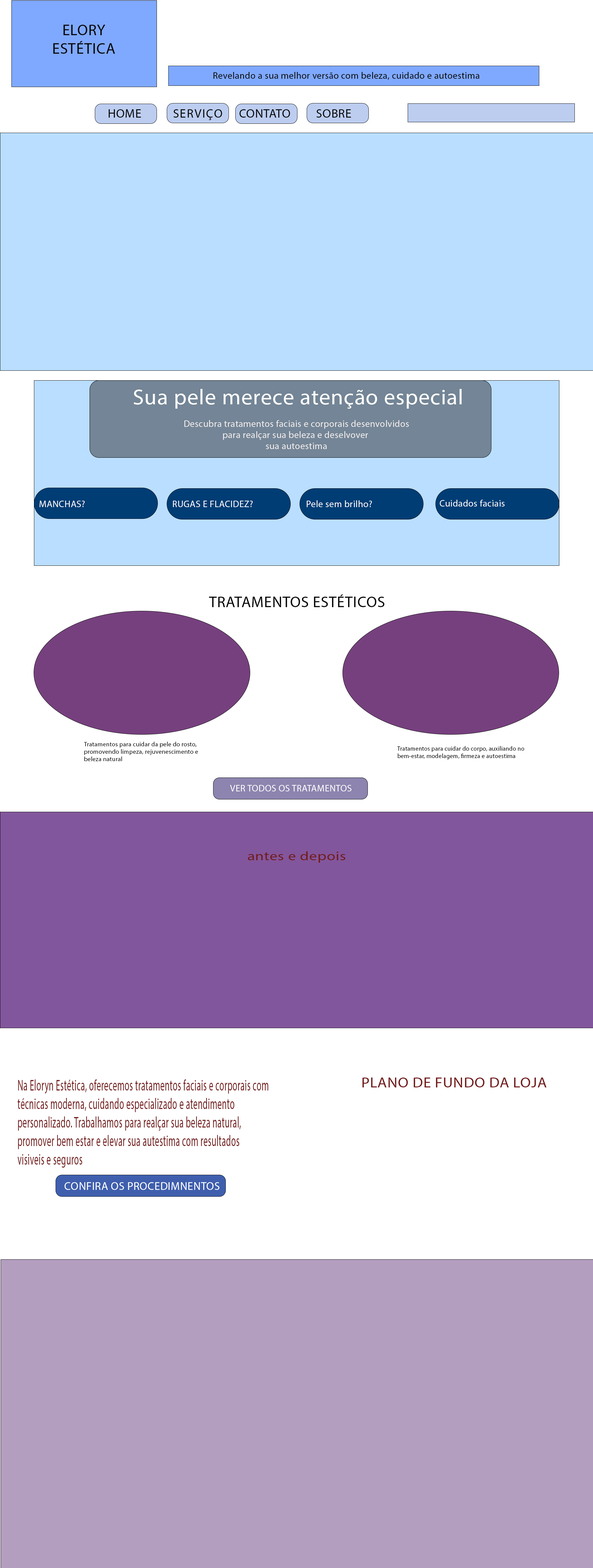
<style>
.page{position:relative;width:593px;height:1568px;background:#ffffff}
.page>*{position:absolute;margin:0}
.t1{font:15.4px "MyriadPro-Regular";letter-spacing:0.025em;color:#080707}
.t2{font:9.3px "MyriadPro-Regular";letter-spacing:0.025em;color:#080707}
.t3{font:12.3px "MyriadPro-Regular";letter-spacing:0.025em;color:#080707}
.t4{font:21.6px "MyriadPro-Regular";letter-spacing:0.025em;color:#fffefe;scale:1.04 1}
.t5{font:9.3px "MyriadPro-Regular";letter-spacing:0.025em;color:#f5eeee}
.t6{font:9.3px "MyriadPro-Regular";letter-spacing:0.025em;color:#fffefe}
.t7{font:6.2px "MyriadPro-Regular";letter-spacing:0.025em;color:#080707}
.t8{font:6.2px "MyriadPro-Regular";letter-spacing:0.025em;color:#080707;scale:0.97 1}
.t9{font:9.3px "MyriadPro-Regular";letter-spacing:0.025em;color:#fffdfd}
.t10{font:12.6px "MyriadPro-Regular";letter-spacing:0.025em;color:#721b1b;scale:1.24 1}
.t11{font:15.4px "MyriadPro-Regular";letter-spacing:0.025em;color:#721b1b;scale:0.56 1}
.t12{font:14.4px "MyriadPro-Regular";letter-spacing:0.025em;color:#721b1b;scale:1.08 1}
.t13{font:11.1px "MyriadPro-Regular";letter-spacing:0.025em;color:#ffffff}
</style>
<div class="page">
<p class="t1" style="left:53px;top:25px;width:62px;height:29px;text-align:center">ELORY<br>ESTÉTICA</p>
<p class="t2" style="left:213px;top:72px;width:266px;height:8px">Revelando a sua melhor versão com beleza, cuidado e autoestima</p>
<p class="t3" style="left:109px;top:109px;width:32px;height:9px">HOME</p>
<p class="t3" style="left:173px;top:109px;width:49px;height:11px">SERVIÇOS</p>
<p class="t3" style="left:239px;top:109px;width:51px;height:9px">CONTATO</p>
<p class="t3" style="left:316px;top:109px;width:35px;height:9px">SOBRE</p>
<p class="t4" style="left:134px;top:389px;width:327px;height:20px">Sua pele merece atenção especial</p>
<p class="t5" style="left:184px;top:420px;width:225px;height:29px;text-align:center">Descubra tratamentos faciais e corporais desenvolvidos<br>para realçar sua beleza e deselvover <br>sua autoestima</p>
<p class="t6" style="left:40px;top:501px;width:45px;height:6px">MANCHAS?</p>
<p class="t6" style="left:173px;top:501px;width:79px;height:6px">RUGAS E FLACIDEZ?</p>
<p class="t6" style="left:307px;top:500px;width:65px;height:7px">Pele sem brilho?</p>
<p class="t6" style="left:440px;top:500px;width:64px;height:7px">Cuidados faciais</p>
<p class="t1" style="left:209px;top:594px;width:175px;height:13px">TRATAMENTOS ESTÉTICOS</p>
<p class="t7" style="left:84px;top:742px;width:114px;height:19px;text-align:justify">Tratamentos para cuidar da pele do rosto, <br>promovendo limpeza, rejuvenescimento e <br>beleza natural</p>
<p class="t8" style="left:397px;top:746px;width:127px;height:13px;text-align:justify">Tratamentos para cuidar do corpo, auxiliando no <br>bem-estar, modelagem, firmeza e autoestima</p>
<p class="t9" style="left:230px;top:785px;width:121px;height:6px">VER TODOS OS TRATAMENTOS</p>
<p class="t10" style="left:248px;top:851px;width:97px;height:12px">antes e depois</p>
<p class="t11" style="left:18px;top:1079px;width:250px;height:89px">Na Eloryn Estética, oferecemos tratamentos faciais e corporais com <br>técnicas moderna, cuidando especializado e atendimento <br>personalizado. Trabalhamos para realçar sua beleza natural, <br>promover bem estar e elevar sua autestima com resultados <br>visiveis e seguros</p>
<p class="t12" style="left:362px;top:1078px;width:184px;height:9px">PLANO DE FUNDO DA LOJA</p>
<p class="t13" style="left:65px;top:1182px;width:154px;height:8px">CONFIRA OS PROCEDIMNENTOS</p>
</div>
